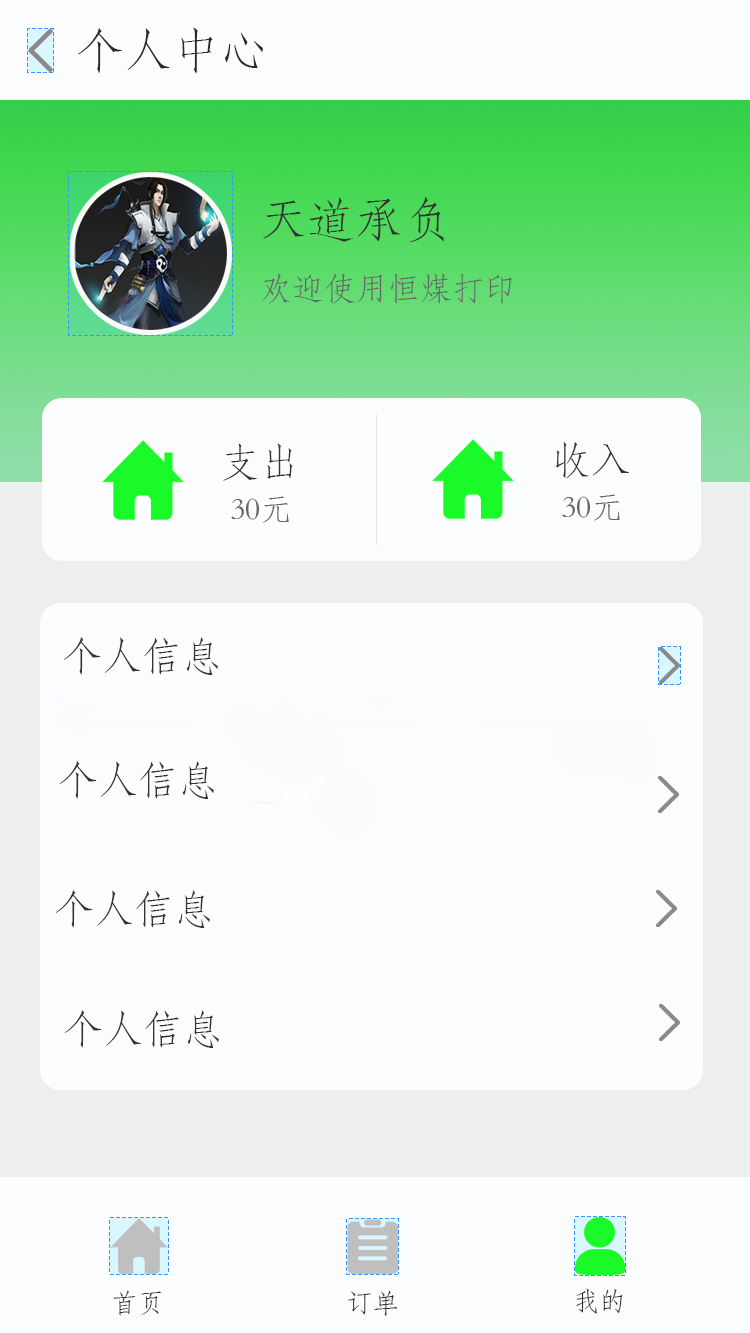
<style>
.page{position:relative;width:750px;height:1333px;background:#fcfdff}
.page>*{position:absolute;margin:0}
.t1{font:48px "STFangsong";color:#2d2929}
.t2{font:48px "STFangsong";color:#333333}
.t3{font:32px "STFangsong";color:#666666}
.t4{font:40px "STFangsong";color:#333333}
.t5{font:26.7px "STFangsong";color:#333333}
</style>
<div class="page">
<p class="t1" style="left:78px;top:27px;width:185px;height:47px">个人中心</p>
<p class="t2" style="left:263px;top:197px;width:181px;height:46px">天道承负</p>
<p class="t3" style="left:262px;top:273px;width:250px;height:31px">欢迎使用恒煤打印</p>
<p class="t4" style="left:223px;top:443px;width:70px;height:38px">支出</p>
<p class="t4" style="left:555px;top:442px;width:74px;height:37px">收入</p>
<p class="t3" style="left:231px;top:496px;width:58px;height:27px">30元</p>
<p class="t3" style="left:562px;top:494px;width:58px;height:27px">30元</p>
<p class="t4" style="left:63px;top:637px;width:155px;height:38px">个人信息</p>
<p class="t4" style="left:59px;top:761px;width:155px;height:38px">个人信息</p>
<p class="t4" style="left:55px;top:890px;width:155px;height:38px">个人信息</p>
<p class="t4" style="left:64px;top:1010px;width:155px;height:38px">个人信息</p>
<p class="t5" style="left:576px;top:1288px;width:47px;height:26px">我的</p>
<p class="t5" style="left:113px;top:1290px;width:48px;height:26px">首页</p>
<p class="t5" style="left:348px;top:1291px;width:50px;height:25px">订单</p>
</div>
